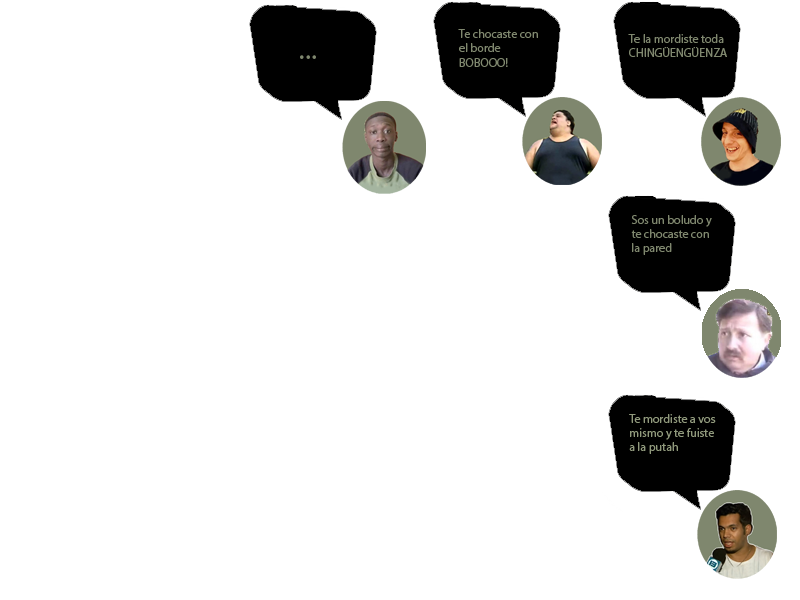
<style>
.page{position:relative;width:800px;height:600px;background:#ffffff}
.page>*{position:absolute;margin:0}
.t1{font:12px "MyriadPro-Regular";color:#7f876e}
.t2{font:30px "MyriadPro-Regular";color:#7f876e}
.t3{font:12px "MyriadPro-Regular";color:#90997c}
</style>
<div class="page">
<p class="t1" style="left:458px;top:29px;width:80px;height:38px">Te chocaste con <br>el borde<br>BOBOOO!</p>
<p class="t1" style="left:628px;top:34px;width:99px;height:23px">Te la mordiste toda<br>CHINGÜENGÜENZA</p>
<p class="t2" style="left:300px;top:55px;width:16px;height:4px">...</p>
<p class="t1" style="left:631px;top:215px;width:81px;height:40px">Sos un boludo y<br>te chocaste con<br>la pared</p>
<p class="t3" style="left:629px;top:414px;width:87px;height:40px">Te mordiste a vos<br>mismo y te fuiste <br>a la putah</p>
</div>
